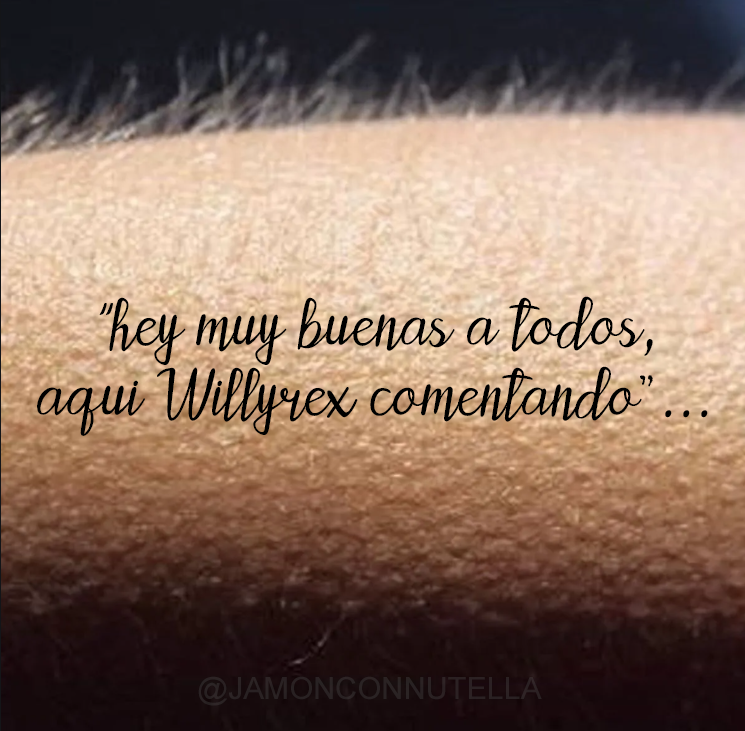
<style>
.page{position:relative;width:745px;height:731px}
.page>*{position:absolute;margin:0}
.t1{font:58.5px "PattyLaBelle";color:#000000}
.t2{font:58.5px "Pristina-Regular";color:#000000}
.t3{font:58.5px "Gigi-Regular";color:#000000}
.t4{font:30.6px "ArialMT";color:#2a2223}
</style>
<div class="page">
<p class="t1" style="left:37px;top:296px;width:671px;height:140px;text-align:center"><span class="t2">“</span>hey muy buenas a todos,<br>aqui Willyrex comentando<span class="t3">”</span>...</p>
<p class="t4" style="left:198px;top:676px;width:344px;height:30px">@JAMONCONNUTELLA</p>
</div>
